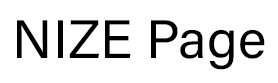
<style>
.page{position:relative;width:278px;height:83px;background:#ffffff}
.page>*{position:absolute;margin:0}
.t1{font:54.2px "AcuminConcept-Regular";color:#000000}
</style>
<div class="page">
<p class="t1" style="left:17px;top:20px;width:248px;height:50px">NIZE Page</p>
</div>
